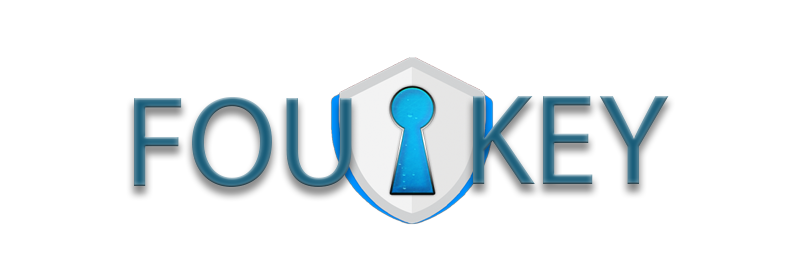
<style>
.page{position:relative;width:800px;height:280px;background:#ffffff}
.page>*{position:absolute;margin:0}
.t1{font:130px "MyriadPro-Regular"}
</style>
<div class="page">
<p class="t1" style="left:134px;top:97px;width:218px;height:90px">FOU</p>
<p class="t1" style="left:473px;top:96px;width:196px;height:88px">KEY</p>
</div>
